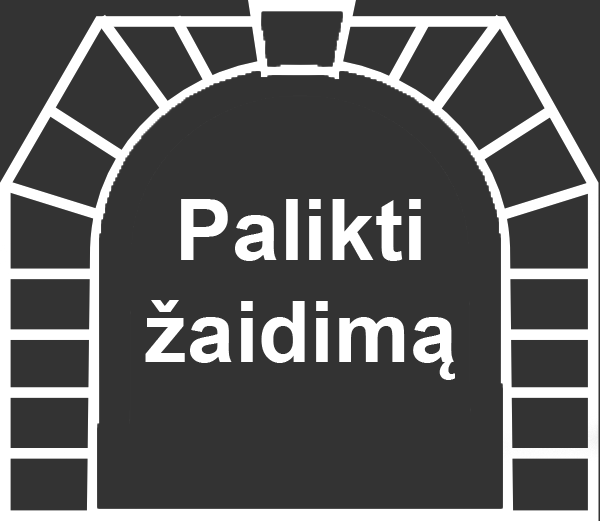
<style>
.page{position:relative;width:600px;height:521px;background:#333333}
.page>*{position:absolute;margin:0}
.t1{font:85.4px "Arial-BoldMT";color:#ffffff}
</style>
<div class="page">
<p class="t1" style="left:145px;top:199px;width:310px;height:181px;text-align:center">Palikti<br>žaidimą</p>
</div>
